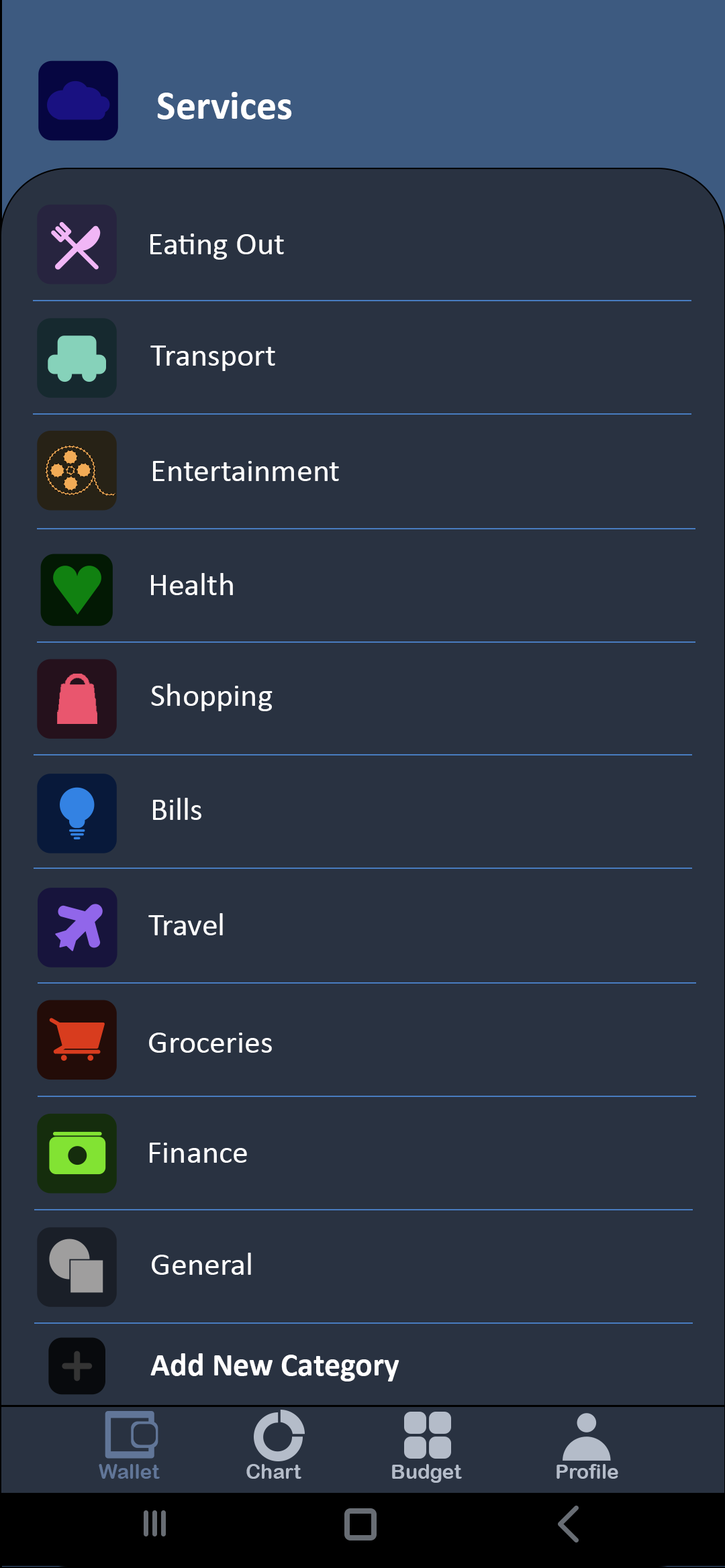
<style>
.page{position:relative;width:725px;height:1568px;background:#293241}
.page>*{position:absolute;margin:0}
.t1{font:40.3px "Calibri-Bold";color:#ffffff}
.t2{font:32.2px "Calibri";color:#ffffff}
.t3{font:32.2px "Calibri-Bold";color:#ffffff}
.t4{font:20.1px "ArialRoundedMTBold";color:#617698}
.t5{font:20.1px "ArialRoundedMTBold";color:#b4bcc9}
</style>
<div class="page">
<p class="t1" style="left:157px;top:92px;width:135px;height:27px">Services</p>
<p class="t2" style="left:150px;top:233px;width:134px;height:27px">Eating Out</p>
<p class="t2" style="left:150px;top:346px;width:125px;height:25px">Transport</p>
<p class="t2" style="left:153px;top:461px;width:186px;height:20px">Entertainment</p>
<p class="t2" style="left:151px;top:573px;width:82px;height:22px">Health</p>
<p class="t2" style="left:151px;top:684px;width:121px;height:27px">Shopping</p>
<p class="t2" style="left:153px;top:798px;width:48px;height:22px">Bills</p>
<p class="t2" style="left:148px;top:913px;width:75px;height:22px">Travel</p>
<p class="t2" style="left:149px;top:1033px;width:123px;height:20px">Groceries</p>
<p class="t2" style="left:150px;top:1143px;width:97px;height:20px">Finance</p>
<p class="t2" style="left:152px;top:1253px;width:99px;height:22px">General</p>
<p class="t3" style="left:150px;top:1353px;width:249px;height:28px">Add New Category</p>
<p class="t4" style="left:99px;top:1464px;width:61px;height:15px">Wallet</p>
<p class="t5" style="left:246px;top:1464px;width:55px;height:15px">Chart</p>
<p class="t5" style="left:392px;top:1464px;width:70px;height:19px">Budget</p>
<p class="t5" style="left:556px;top:1464px;width:62px;height:15px">Profile</p>
</div>
